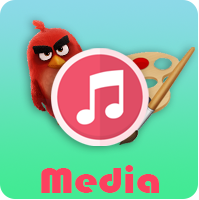
<style>
.page{position:relative;width:199px;height:200px}
.page>*{position:absolute;margin:0}
.t1{font:38px "Bauhaus93";color:#fc415f;scale:1.14 1}
</style>
<div class="page">
<p class="t1" style="left:41px;top:165px;width:118px;height:28px">Media</p>
</div>
